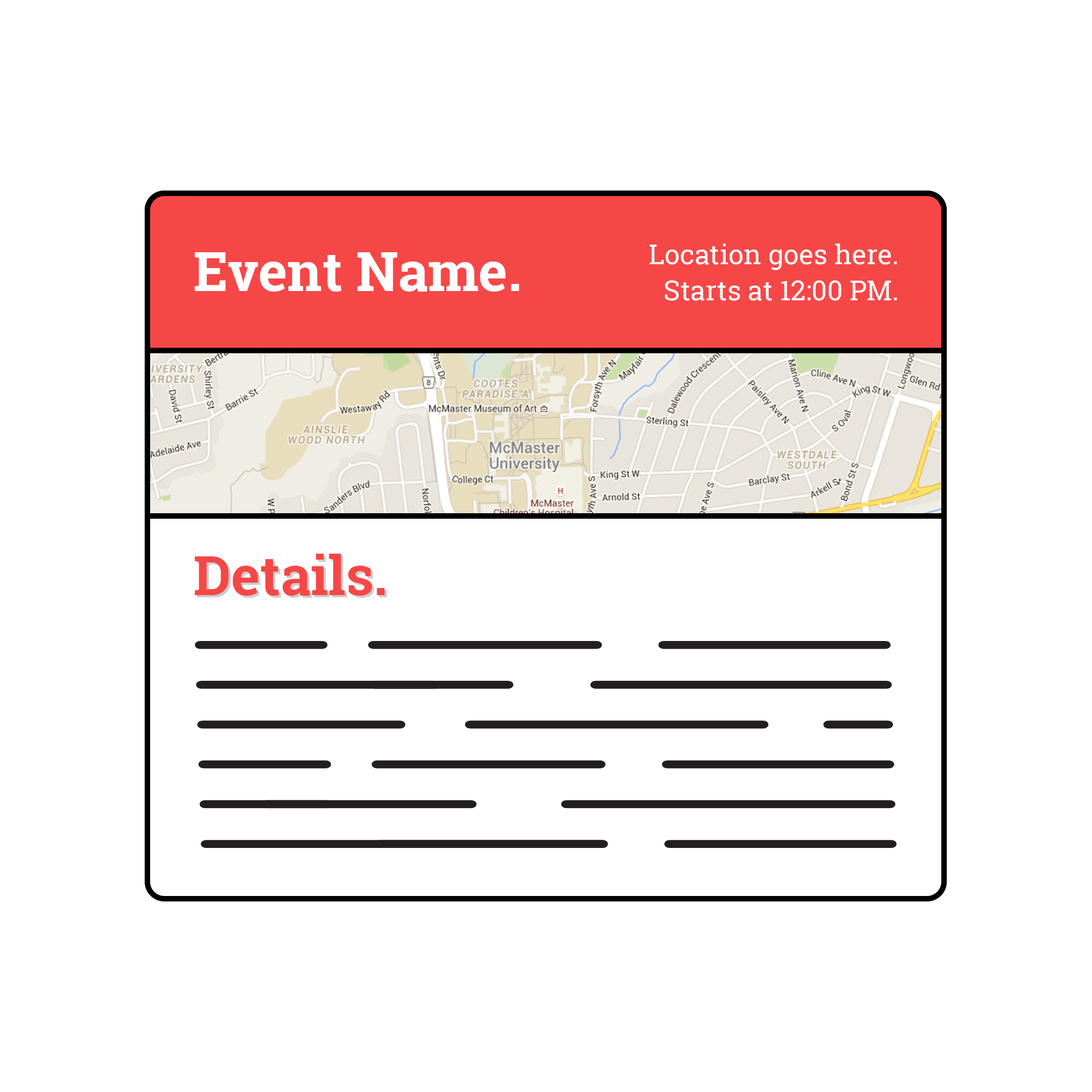
<style>
.page{position:relative;width:1092px;height:1092px;background:#ffffff}
.page>*{position:absolute;margin:0}
.t1{font:27.3px "RobotoSlab-Regular";color:#ffffff}
.t2{font:54.6px "RobotoSlab-Bold";color:#ffffff}
.t3{font:54.6px "RobotoSlab-Bold";color:#f64747}
</style>
<div class="page">
<p class="t1" style="left:649px;top:244px;width:248px;height:26px">Location goes here.</p>
<p class="t2" style="left:194px;top:252px;width:325px;height:40px">Event Name.</p>
<p class="t1" style="left:665px;top:280px;width:232px;height:21px">Starts at 12:00 PM.</p>
<p class="t3" style="left:194px;top:554px;width:191px;height:42px">Details.</p>
</div>
